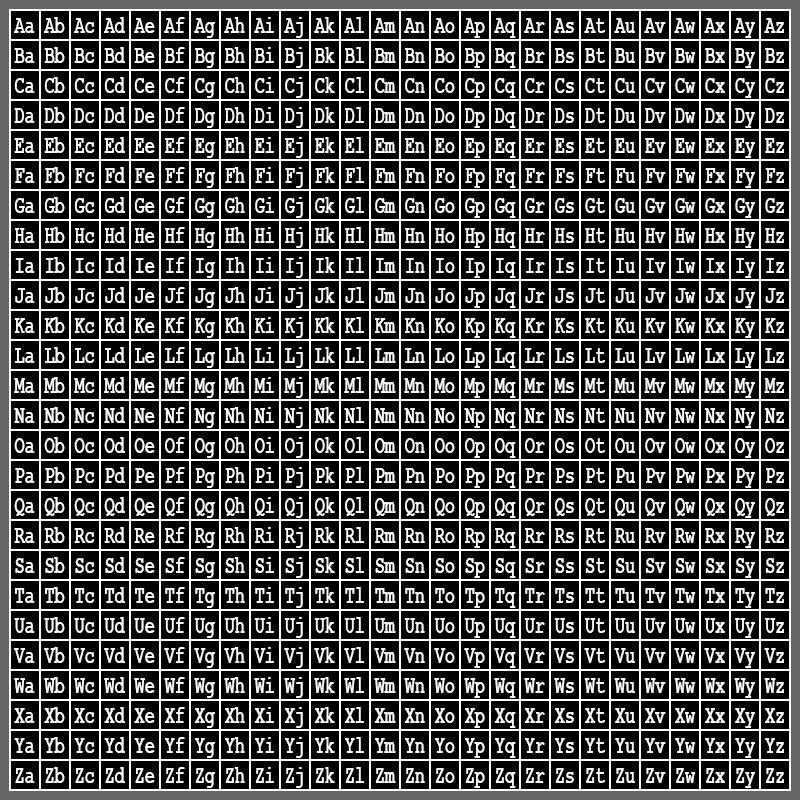
<style>
.page{position:relative;width:800px;height:800px;background:#000000}
.page>*{position:absolute;margin:0}
.t1{font:25px "CourierNewPS-BoldMT";color:#ffffff;scale:0.67 1}
</style>
<div class="page">
<p class="t1" style="left:14px;top:17px;width:770px;height:771px">Aa Ab Ac Ad Ae Af Ag Ah Ai Aj Ak Al Am An Ao Ap Aq Ar As At Au Av Aw Ax Ay Az<br>Ba Bb Bc Bd Be Bf Bg Bh Bi Bj Bk Bl Bm Bn Bo Bp Bq Br Bs Bt Bu Bv Bw Bx By Bz<br>Ca Cb Cc Cd Ce Cf Cg Ch Ci Cj Ck Cl Cm Cn Co Cp Cq Cr Cs Ct Cu Cv Cw Cx Cy Cz<br>Da Db Dc Dd De Df Dg Dh Di Dj Dk Dl Dm Dn Do Dp Dq Dr Ds Dt Du Dv Dw Dx Dy Dz<br>Ea Eb Ec Ed Ee Ef Eg Eh Ei Ej Ek El Em En Eo Ep Eq Er Es Et Eu Ev Ew Ex Ey Ez<br>Fa Fb Fc Fd Fe Ff Fg Fh Fi Fj Fk Fl Fm Fn Fo Fp Fq Fr Fs Ft Fu Fv Fw Fx Fy Fz<br>Ga Gb Gc Gd Ge Gf Gg Gh Gi Gj Gk Gl Gm Gn Go Gp Gq Gr Gs Gt Gu Gv Gw Gx Gy Gz<br>Ha Hb Hc Hd He Hf Hg Hh Hi Hj Hk Hl Hm Hn Ho Hp Hq Hr Hs Ht Hu Hv Hw Hx Hy Hz<br>Ia Ib Ic Id Ie If Ig Ih Ii Ij Ik Il Im In Io Ip Iq Ir Is It Iu Iv Iw Ix Iy Iz<br>Ja Jb Jc Jd Je Jf Jg Jh Ji Jj Jk Jl Jm Jn Jo Jp Jq Jr Js Jt Ju Jv Jw Jx Jy Jz<br>Ka Kb Kc Kd Ke Kf Kg Kh Ki Kj Kk Kl Km Kn Ko Kp Kq Kr Ks Kt Ku Kv Kw Kx Ky Kz<br>La Lb Lc Ld Le Lf Lg Lh Li Lj Lk Ll Lm Ln Lo Lp Lq Lr Ls Lt Lu Lv Lw Lx Ly Lz<br>Ma Mb Mc Md Me Mf Mg Mh Mi Mj Mk Ml Mm Mn Mo Mp Mq Mr Ms Mt Mu Mv Mw Mx My Mz<br>Na Nb Nc Nd Ne Nf Ng Nh Ni Nj Nk Nl Nm Nn No Np Nq Nr Ns Nt Nu Nv Nw Nx Ny Nz<br>Oa Ob Oc Od Oe Of Og Oh Oi Oj Ok Ol Om On Oo Op Oq Or Os Ot Ou Ov Ow Ox Oy Oz<br>Pa Pb Pc Pd Pe Pf Pg Ph Pi Pj Pk Pl Pm Pn Po Pp Pq Pr Ps Pt Pu Pv Pw Px Py Pz<br>Qa Qb Qc Qd Qe Qf Qg Qh Qi Qj Qk Ql Qm Qn Qo Qp Qq Qr Qs Qt Qu Qv Qw Qx Qy Qz<br>Ra Rb Rc Rd Re Rf Rg Rh Ri Rj Rk Rl Rm Rn Ro Rp Rq Rr Rs Rt Ru Rv Rw Rx Ry Rz<br>Sa Sb Sc Sd Se Sf Sg Sh Si Sj Sk Sl Sm Sn So Sp Sq Sr Ss St Su Sv Sw Sx Sy Sz<br>Ta Tb Tc Td Te Tf Tg Th Ti Tj Tk Tl Tm Tn To Tp Tq Tr Ts Tt Tu Tv Tw Tx Ty Tz<br>Ua Ub Uc Ud Ue Uf Ug Uh Ui Uj Uk Ul Um Un Uo Up Uq Ur Us Ut Uu Uv Uw Ux Uy Uz<br>Va Vb Vc Vd Ve Vf Vg Vh Vi Vj Vk Vl Vm Vn Vo Vp Vq Vr Vs Vt Vu Vv Vw Vx Vy Vz<br>Wa Wb Wc Wd We Wf Wg Wh Wi Wj Wk Wl Wm Wn Wo Wp Wq Wr Ws Wt Wu Wv Ww Wx Wy Wz<br>Xa Xb Xc Xd Xe Xf Xg Xh Xi Xj Xk Xl Xm Xn Xo Xp Xq Xr Xs Xt Xu Xv Xw Xx Xy Xz<br>Ya Yb Yc Yd Ye Yf Yg Yh Yi Yj Yk Yl Ym Yn Yo Yp Yq Yr Ys Yt Yu Yv Yw Yx Yy Yz<br>Za Zb Zc Zd Ze Zf Zg Zh Zi Zj Zk Zl Zm Zn Zo Zp Zq Zr Zs Zt Zu Zv Zw Zx Zy Zz</p>
</div>
